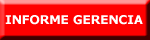
<style>
.page{position:relative;width:150px;height:40px;background:#ff0000}
.page>*{position:absolute;margin:0}
.t1{font:12px "Verdana-Bold";color:#ffffff}
</style>
<div class="page">
<p class="t1" style="left:5px;top:15px;width:138px;height:10px">INFORME GERENCIA</p>
</div>
